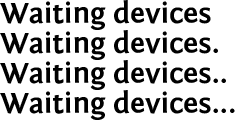
<style>
.page{position:relative;width:235px;height:120px;background:#ffffff}
.page>*{position:absolute;margin:0}
.t1{font:30px "FontinSans-Bold";color:#000000}
</style>
<div class="page">
<p class="t1" style="left:0px;top:0px;width:211px;height:30px">Waiting devices</p>
<p class="t1" style="left:0px;top:30px;width:218px;height:30px">Waiting devices.</p>
<p class="t1" style="left:0px;top:60px;width:226px;height:30px">Waiting devices..</p>
<p class="t1" style="left:0px;top:90px;width:235px;height:30px">Waiting devices...</p>
</div>
